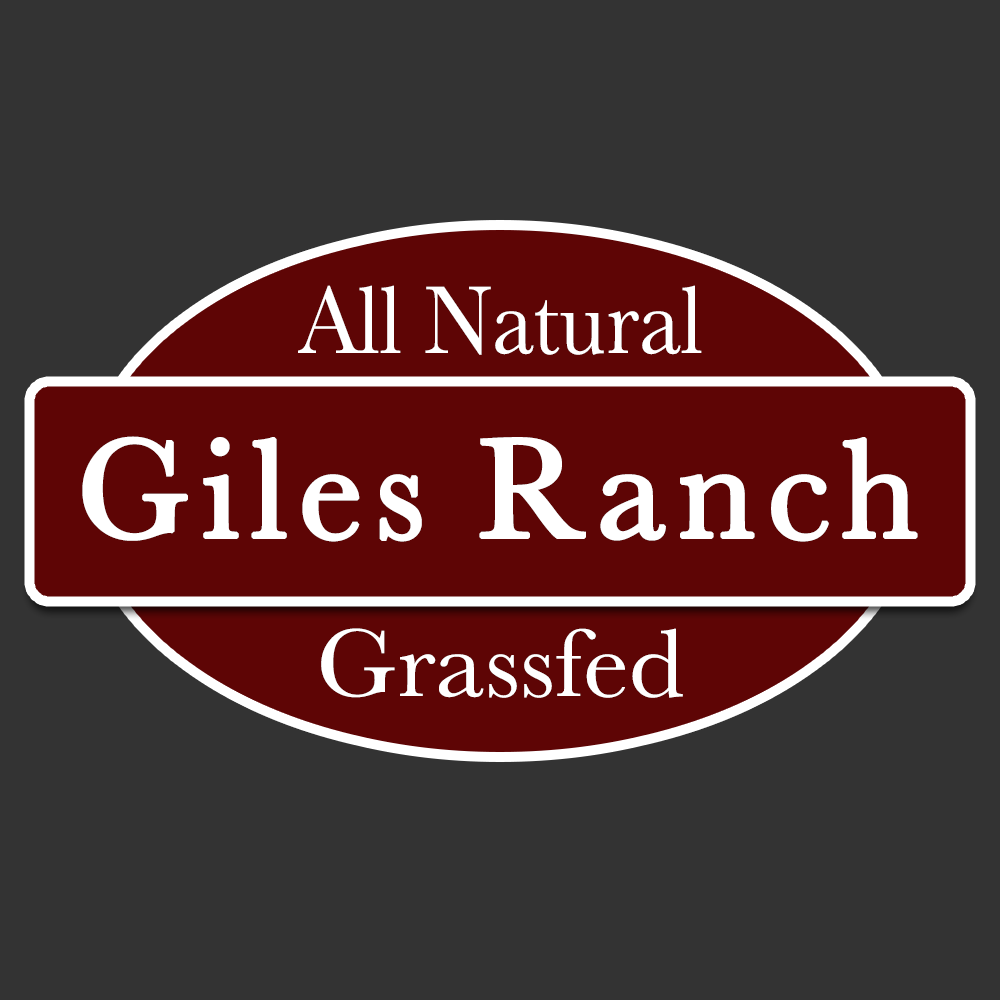
<style>
.page{position:relative;width:1000px;height:1000px;background:#333333}
.page>*{position:absolute;margin:0}
.t1{font:100px "Baskerville";color:#ffffff;scale:0.9 1}
.t2{font:145.8px "Baskerville";letter-spacing:0.06em;color:#ffffff;font-weight:bold}
.t3{font:100px "Baskerville";color:#ffffff;scale:1.05 1}
</style>
<div class="page">
<p class="t1" style="left:298px;top:285px;width:404px;height:70px">All Natural</p>
<p class="t2" style="left:82px;top:436px;width:836px;height:106px">Giles Ranch</p>
<p class="t3" style="left:321px;top:628px;width:362px;height:70px">Grassfed</p>
</div>
